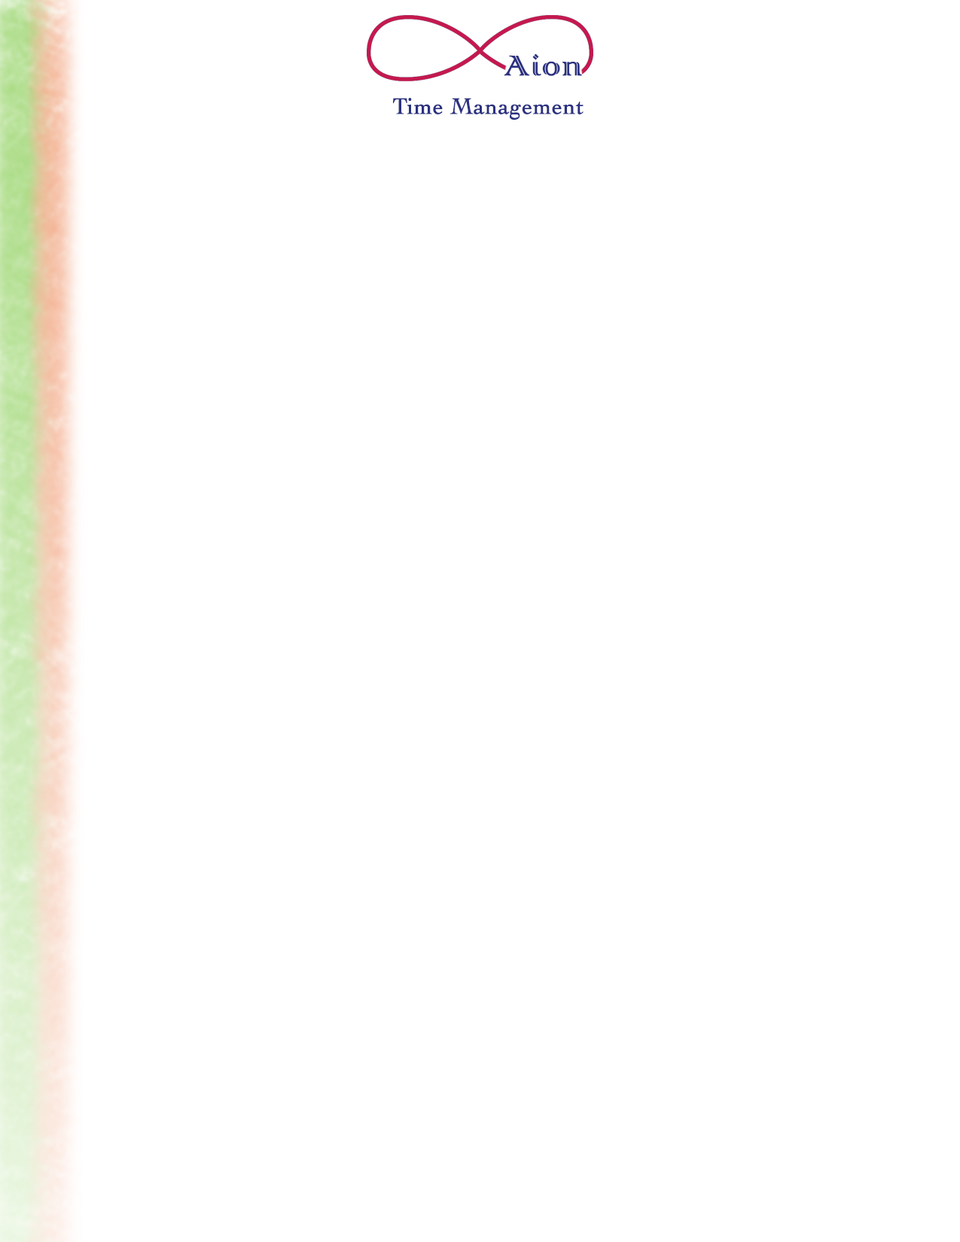
<style>
.page{position:relative;width:960px;height:1242px;background:#ffffff}
.page>*{position:absolute;margin:0}
.t1{font:37.4px "ColonnaMT";color:#2b3181;font-weight:bold}
.t2{font:23.3px "Cochin";color:#2b3181;font-weight:bold}
</style>
<div class="page">
<p class="t1" style="left:504px;top:53px;width:78px;height:23px">Aion</p>
<p class="t2" style="left:393px;top:98px;width:190px;height:22px">Time Management</p>
</div>
